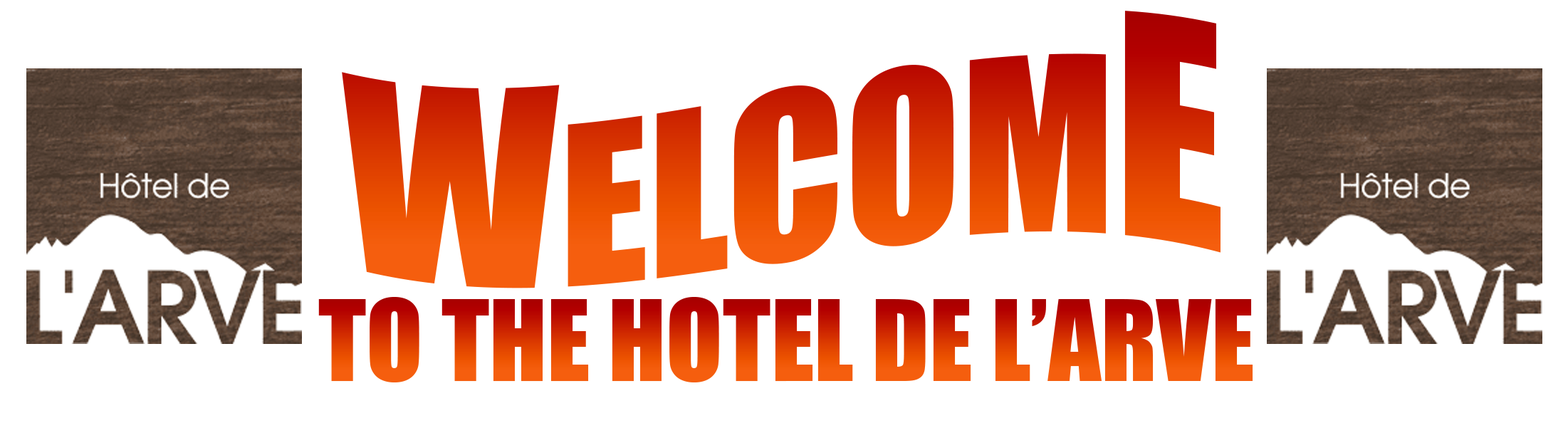
<style>
.page{position:relative;width:1568px;height:423px;background:#ffffff}
.page>*{position:absolute;margin:0}
.t1{font:213.6px "Impact"}
.t2{font:267px "Impact"}
.t3{font:104px "Impact"}
</style>
<div class="page">
<p class="t1" style="left:342px;top:11px;width:879px;height:277px"><span class="t2">W</span>ELCOM<span class="t2">E</span></p>
<p class="t3" style="left:318px;top:297px;width:935px;height:85px">TO THE HOTEL DE L’ARVE</p>
</div>
